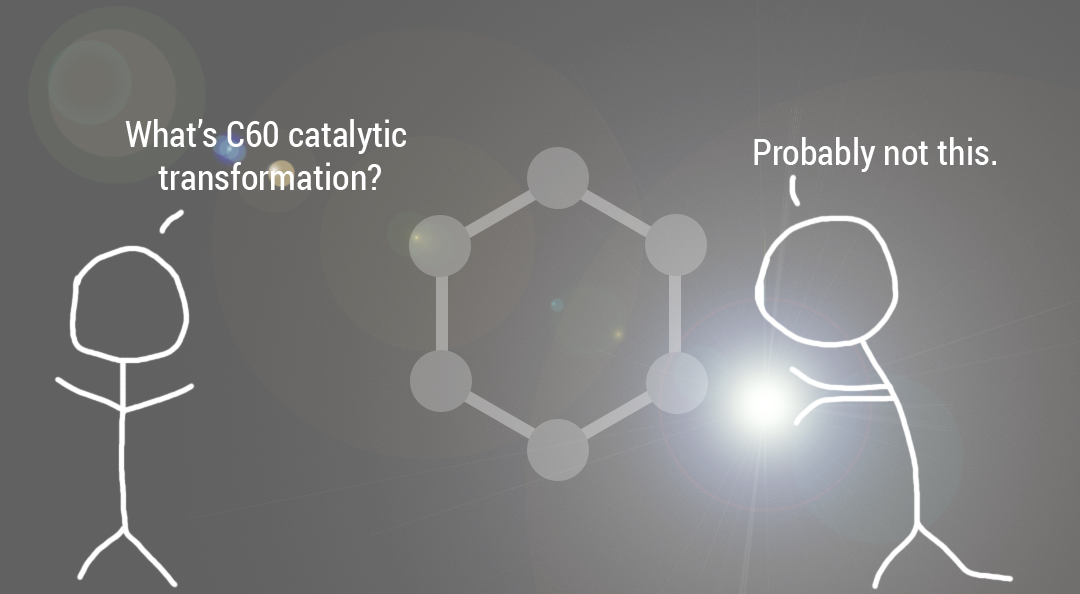
<style>
.page{position:relative;width:1080px;height:594px}
.page>*{position:absolute;margin:0}
.t1{font:36px "RobotoCondensed-Regular";color:#ffffff}
</style>
<div class="page">
<p class="t1" style="left:125px;top:119px;width:282px;height:71px;text-align:center">What’s C60 catalytic <br>transformation?</p>
<p class="t1" style="left:754px;top:137px;width:242px;height:35px">Probably not this.</p>
</div>
